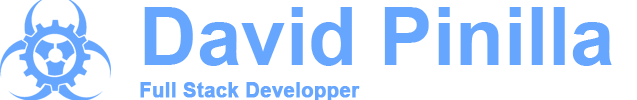
<style>
.page{position:relative;width:637px;height:100px;background:#ffffff}
.page>*{position:absolute;margin:0}
.t1{font:80px "Arial-BoldMT";color:#66a6ff}
.t2{font:20px "Arial-BoldMT";color:#66a6ff;font-weight:bold}
</style>
<div class="page">
<p class="t1" style="left:144px;top:7px;width:468px;height:59px">David Pinilla</p>
<p class="t2" style="left:140px;top:82px;width:220px;height:20px">Full Stack Developper</p>
</div>
